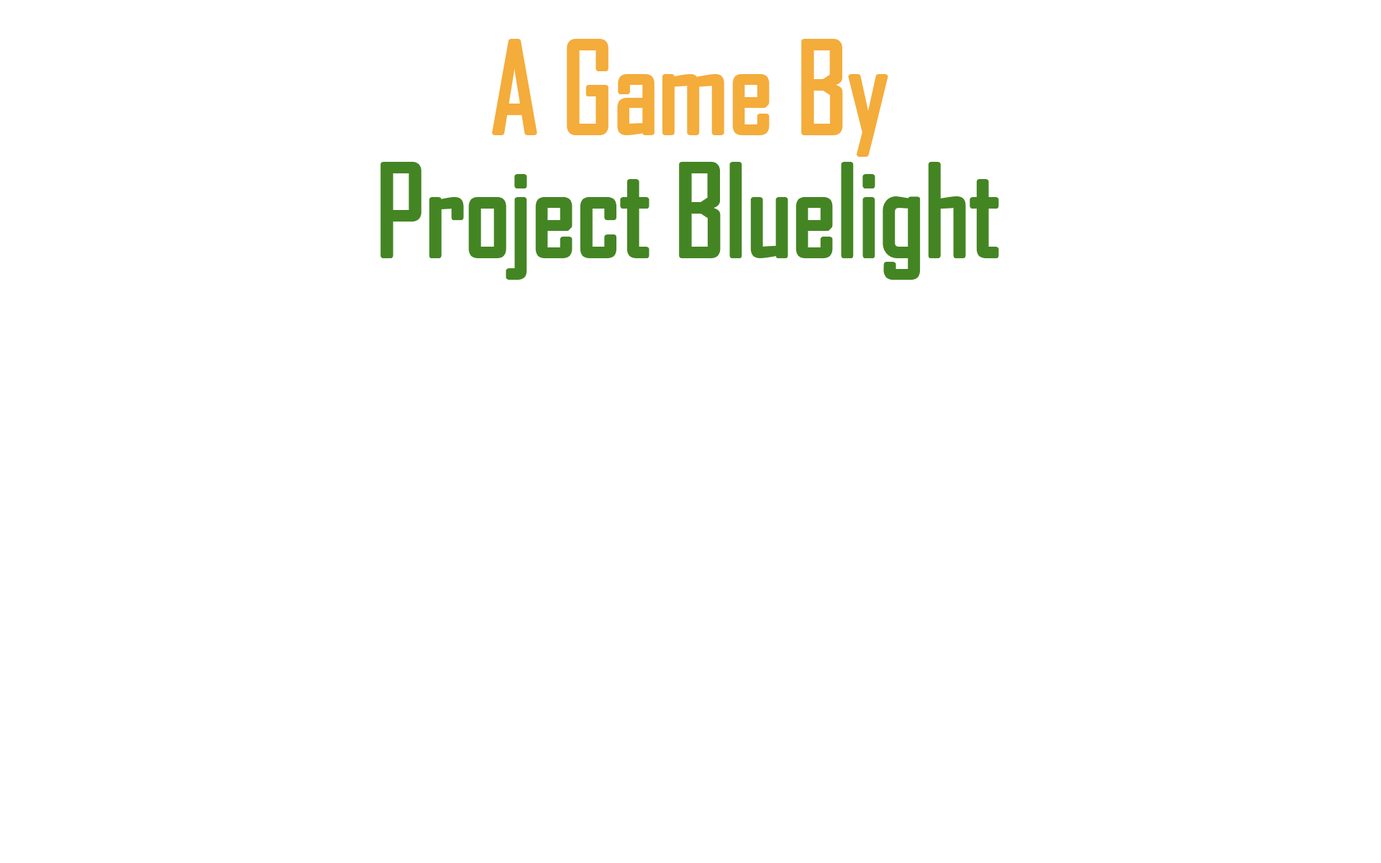
<style>
.page{position:relative;width:1381px;height:863px;background:#ffffff}
.page>*{position:absolute;margin:0}
.t1{font:119.9px "AgencyFB-Reg";color:#f4ac3b}
.t2{font:119.9px "AgencyFB-Reg";color:#448523}
</style>
<div class="page">
<p class="t1" style="left:494px;top:41px;width:392px;height:114px">A Game By</p>
<p class="t2" style="left:383px;top:164px;width:614px;height:114px">Project Bluelight</p>
</div>
